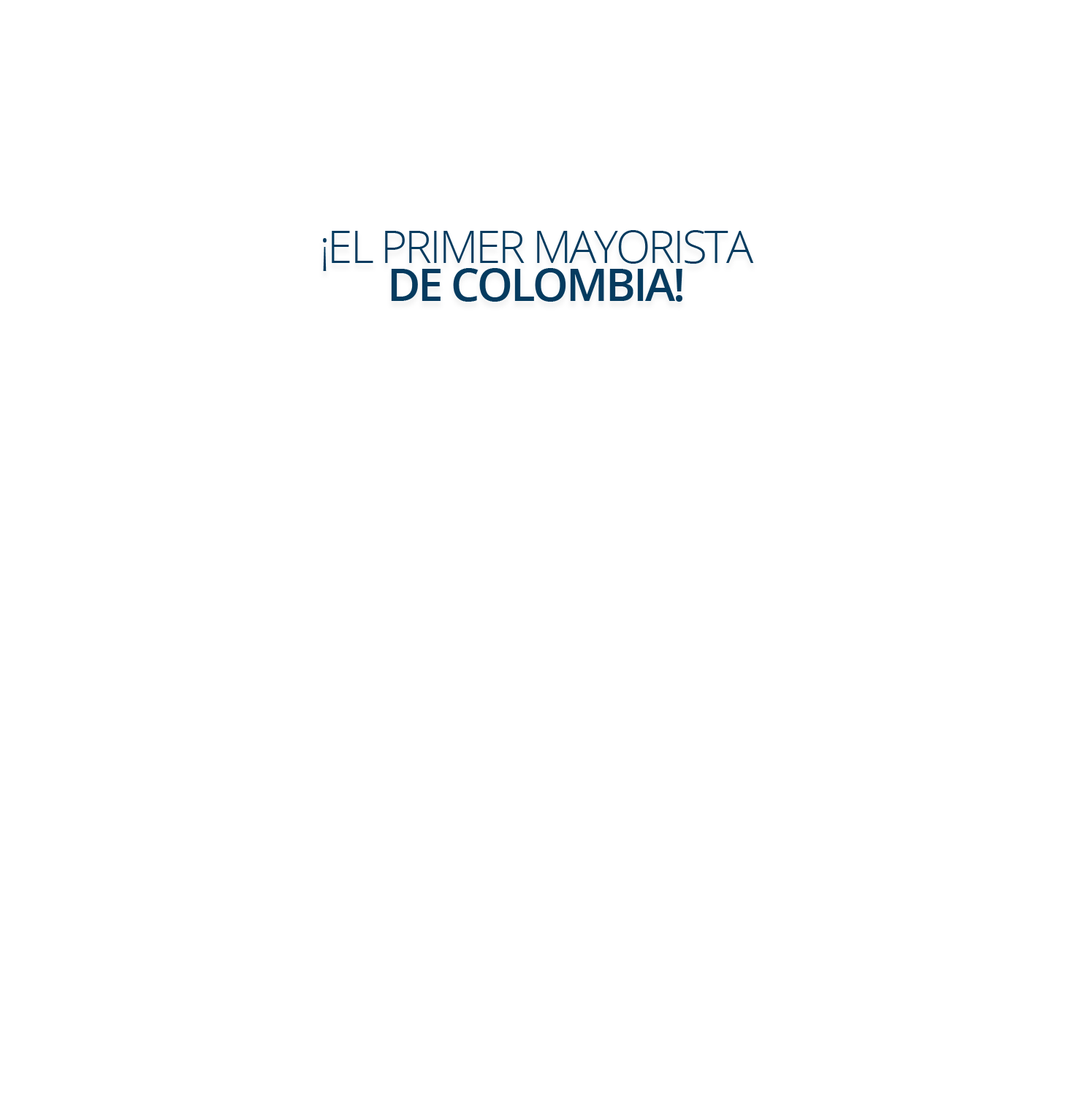
<style>
.page{position:relative;width:1074px;height:1111px;background:#ffffff}
.page>*{position:absolute;margin:0}
.t1{font:45.3px "OpenSans-Light";letter-spacing:-0.05em;color:#053b5f}
.t2{font:45.3px "OpenSans-SemiBold";letter-spacing:-0.05em;color:#053b5f}
</style>
<div class="page">
<p class="t1" style="left:323px;top:230px;width:431px;height:72px">¡EL PRIMER MAYORISTA <span class="t2">DE COLOMBIA!</span></p>
</div>
